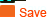
<style>
.page{position:relative;width:49px;height:17px;background:#ffffff}
.page>*{position:absolute;margin:0}
.t1{font:12px "ArialMT";color:#f5ffff}
</style>
<div class="page">
<p class="t1" style="left:19px;top:4px;width:28px;height:9px">Save</p>
</div>
